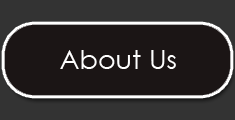
<style>
.page{position:relative;width:235px;height:120px;background:#1b1515}
.page>*{position:absolute;margin:0}
.t1{font:27.1px "CenturyGothic";color:#ffffff}
</style>
<div class="page">
<p class="t1" style="left:60px;top:50px;width:116px;height:19px">About Us</p>
</div>
